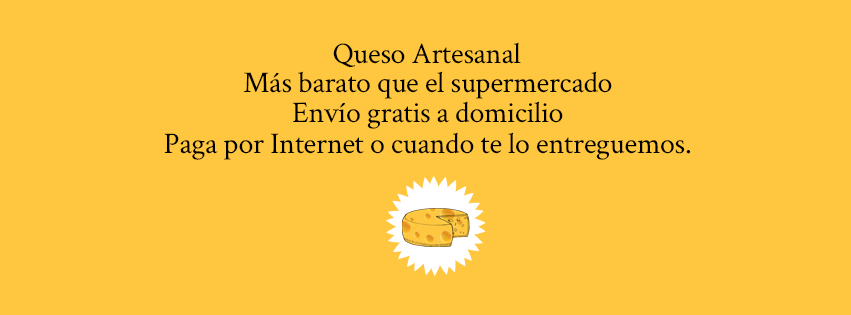
<style>
.page{position:relative;width:851px;height:315px;background:#ffc63f}
.page>*{position:absolute;margin:0}
.t1{font:30px "CrimsonText-Roman";letter-spacing:-0.01em;color:#000000}
</style>
<div class="page">
<p class="t1" style="left:333px;top:42px;width:188px;height:25px">Queso Artesanal</p>
<p class="t1" style="left:243px;top:71px;width:369px;height:28px">Más barato que el supermercado</p>
<p class="t1" style="left:292px;top:101px;width:271px;height:28px">Envío gratis a domicilio</p>
<p class="t1" style="left:164px;top:132px;width:527px;height:28px">Paga por Internet o cuando te lo entreguemos.</p>
</div>
